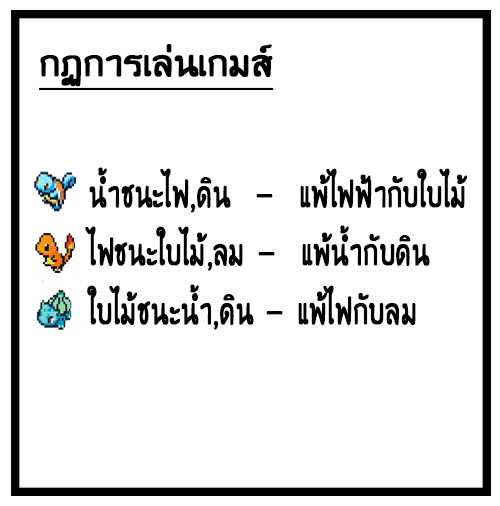
<style>
.page{position:relative;width:500px;height:506px;background:#ffffff}
.page>*{position:absolute;margin:0}
.t1{font:48.8px "WRTishKid";letter-spacing:-0.01em;color:#000000;font-weight:bold;text-decoration:underline}
.t2{font:48.8px "WRTishKid";color:#000000;font-weight:bold;scale:0.71 1}
</style>
<div class="page">
<p class="t1" style="left:39px;top:44px;width:235px;height:46px">กฏการเล่นเกมส์</p>
<p class="t2" style="left:85px;top:167px;width:382px;height:163px;text-align:right">น้ำชนะไฟ,ดิน  -  แพ้ไฟฟ้ากับใบไม้<br>ไฟชนะใบไม้,ลม -  แพ้น้ำกับดิน<br>ใบไม้ชนะน้ำ,ดิน - แพ้ไฟกับลม</p>
</div>
